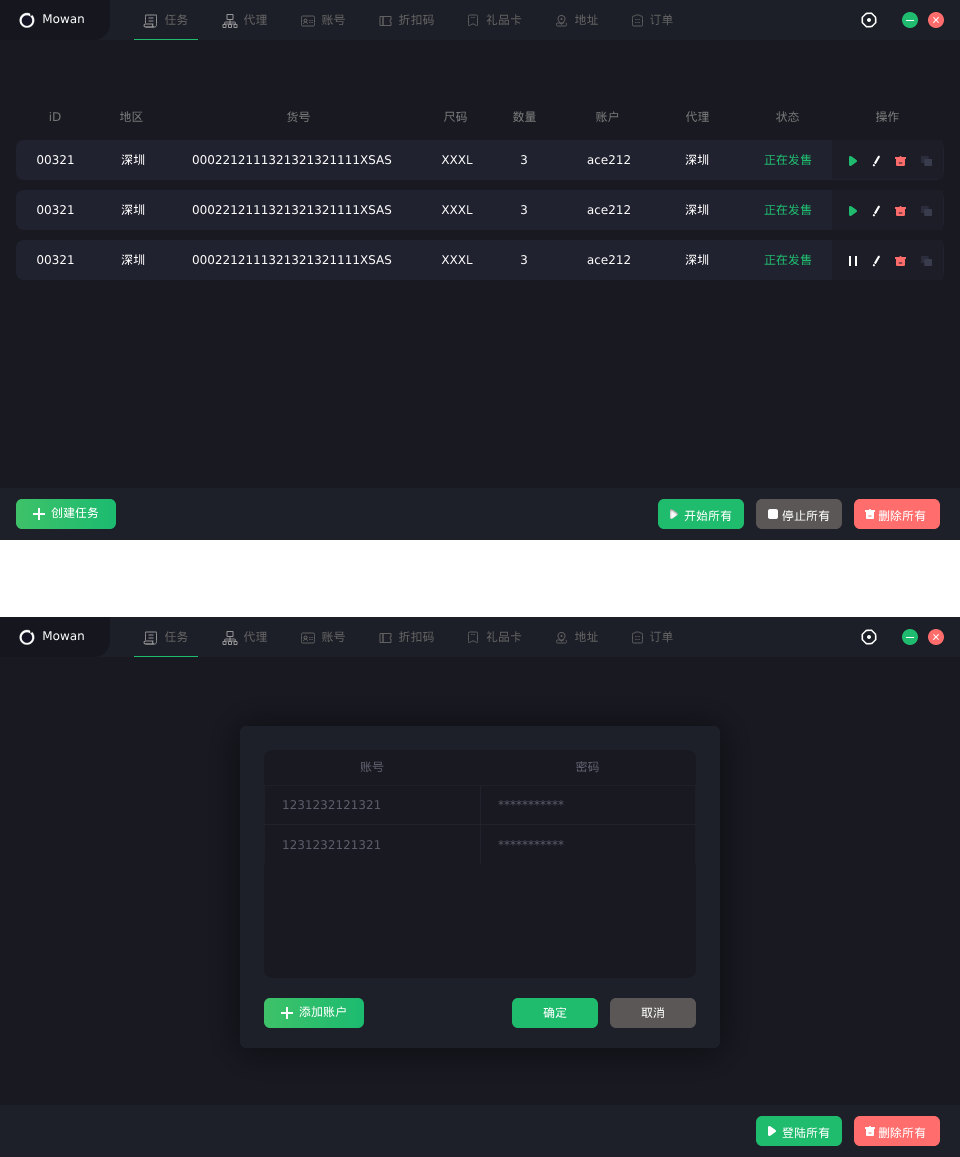
<style>
.page{position:relative;width:960px;height:1157px;background:#181921}
.page>*{position:absolute;margin:0}
.t1{font:12px "PingFangSC-Medium";color:#ffffff}
.t2{font:12px "PingFangSC-Regular";color:#606060}
.t3{font:12px "PingFangSC-Regular";color:#777777}
.t4{font:12px "PingFangSC-Regular";color:#ffffff}
.t5{font:12px "PingFangSC-Regular";color:#1fbb6f}
.t6{font:12px "PingFangSC-Regular";color:#5b5d6a}
</style>
<div class="page">
<p class="t1" style="left:43px;top:14px;width:41px;height:10px">Mowan</p>
<p class="t2" style="left:164px;top:14px;width:24px;height:12px">任务</p>
<p class="t2" style="left:243px;top:14px;width:24px;height:12px">代理</p>
<p class="t2" style="left:322px;top:14px;width:23px;height:12px">账号</p>
<p class="t2" style="left:398px;top:14px;width:36px;height:12px">折扣码</p>
<p class="t2" style="left:486px;top:14px;width:36px;height:12px">礼品卡</p>
<p class="t2" style="left:575px;top:14px;width:23px;height:11px">地址</p>
<p class="t2" style="left:650px;top:14px;width:23px;height:12px">订单</p>
<p class="t3" style="left:49px;top:111px;width:12px;height:10px">iD</p>
<p class="t3" style="left:120px;top:111px;width:23px;height:11px">地区</p>
<p class="t3" style="left:287px;top:111px;width:23px;height:12px">货号</p>
<p class="t3" style="left:444px;top:111px;width:23px;height:12px">尺码</p>
<p class="t3" style="left:513px;top:111px;width:23px;height:12px">数量</p>
<p class="t3" style="left:596px;top:111px;width:23px;height:12px">账户</p>
<p class="t3" style="left:685px;top:111px;width:24px;height:12px">代理</p>
<p class="t3" style="left:775px;top:111px;width:24px;height:12px">状态</p>
<p class="t3" style="left:876px;top:111px;width:23px;height:12px">操作</p>
<p class="t4" style="left:37px;top:155px;width:37px;height:10px">00321</p>
<p class="t4" style="left:121px;top:154px;width:24px;height:12px">深圳</p>
<p class="t4" style="left:192px;top:155px;width:200px;height:10px">0002212111321321321111XSAS</p>
<p class="t4" style="left:441px;top:155px;width:32px;height:9px">XXXL</p>
<p class="t4" style="left:521px;top:155px;width:6px;height:10px">3</p>
<p class="t4" style="left:587px;top:155px;width:43px;height:10px">ace212</p>
<p class="t4" style="left:685px;top:154px;width:24px;height:12px">深圳</p>
<p class="t5" style="left:764px;top:154px;width:48px;height:12px">正在发售</p>
<p class="t4" style="left:37px;top:205px;width:37px;height:10px">00321</p>
<p class="t4" style="left:121px;top:204px;width:24px;height:12px">深圳</p>
<p class="t4" style="left:192px;top:205px;width:200px;height:10px">0002212111321321321111XSAS</p>
<p class="t4" style="left:441px;top:205px;width:32px;height:9px">XXXL</p>
<p class="t4" style="left:521px;top:205px;width:6px;height:10px">3</p>
<p class="t4" style="left:587px;top:205px;width:43px;height:10px">ace212</p>
<p class="t4" style="left:685px;top:204px;width:24px;height:12px">深圳</p>
<p class="t5" style="left:764px;top:204px;width:48px;height:12px">正在发售</p>
<p class="t4" style="left:37px;top:255px;width:37px;height:10px">00321</p>
<p class="t4" style="left:121px;top:254px;width:24px;height:12px">深圳</p>
<p class="t4" style="left:192px;top:255px;width:200px;height:10px">0002212111321321321111XSAS</p>
<p class="t4" style="left:441px;top:255px;width:32px;height:9px">XXXL</p>
<p class="t4" style="left:521px;top:255px;width:6px;height:10px">3</p>
<p class="t4" style="left:587px;top:255px;width:43px;height:10px">ace212</p>
<p class="t4" style="left:685px;top:254px;width:24px;height:12px">深圳</p>
<p class="t5" style="left:764px;top:254px;width:48px;height:12px">正在发售</p>
<p class="t1" style="left:51px;top:507px;width:48px;height:12px">创建任务</p>
<p class="t1" style="left:684px;top:510px;width:48px;height:12px">开始所有</p>
<p class="t1" style="left:782px;top:510px;width:48px;height:12px">停止所有</p>
<p class="t1" style="left:878px;top:510px;width:48px;height:12px">删除所有</p>
<p class="t1" style="left:43px;top:631px;width:41px;height:10px">Mowan</p>
<p class="t2" style="left:164px;top:631px;width:24px;height:12px">任务</p>
<p class="t2" style="left:243px;top:631px;width:24px;height:12px">代理</p>
<p class="t2" style="left:322px;top:631px;width:23px;height:12px">账号</p>
<p class="t2" style="left:398px;top:631px;width:36px;height:12px">折扣码</p>
<p class="t2" style="left:486px;top:631px;width:36px;height:12px">礼品卡</p>
<p class="t2" style="left:575px;top:631px;width:23px;height:11px">地址</p>
<p class="t2" style="left:650px;top:631px;width:23px;height:12px">订单</p>
<p class="t6" style="left:360px;top:761px;width:24px;height:12px">账号</p>
<p class="t6" style="left:576px;top:761px;width:23px;height:12px">密码</p>
<p class="t6" style="left:283px;top:800px;width:98px;height:10px">1231232121321</p>
<p class="t6" style="left:498px;top:800px;width:66px;height:6px">***********</p>
<p class="t6" style="left:283px;top:840px;width:98px;height:10px">1231232121321</p>
<p class="t6" style="left:498px;top:840px;width:66px;height:6px">***********</p>
<p class="t1" style="left:299px;top:1006px;width:47px;height:12px">添加账户</p>
<p class="t1" style="left:543px;top:1007px;width:24px;height:12px">确定</p>
<p class="t1" style="left:641px;top:1007px;width:23px;height:12px">取消</p>
<p class="t1" style="left:782px;top:1127px;width:48px;height:12px">登陆所有</p>
<p class="t1" style="left:878px;top:1127px;width:48px;height:12px">删除所有</p>
</div>
